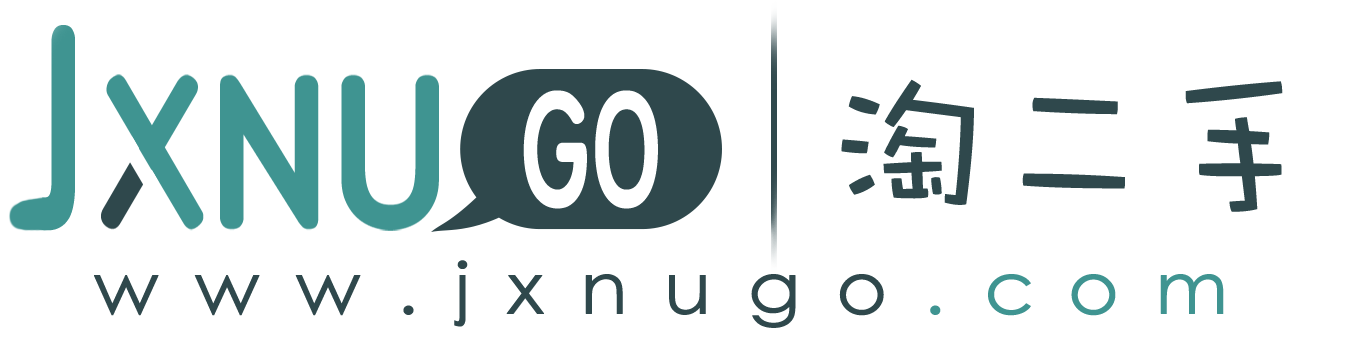
<style>
.page{position:relative;width:1365px;height:358px;background:#ffffff}
.page>*{position:absolute;margin:0}
.t1{font:168.1px "DFWaWaSC-W5";color:#2f484c}
.t2{font:72px "STHeiti";letter-spacing:0.44em;color:#2f484c;font-weight:bold;scale:1.08 1}
.t3{font:72px "STHeiti";letter-spacing:0.44em;color:#3f9491;font-weight:bold;scale:1.08 1}
</style>
<div class="page">
<p class="t1" style="left:841px;top:79px;width:442px;height:133px">淘二手</p>
<p class="t2" style="left:94px;top:260px;width:1130px;height:68px">www.jxnugo<span class="t3">.com</span></p>
</div>
